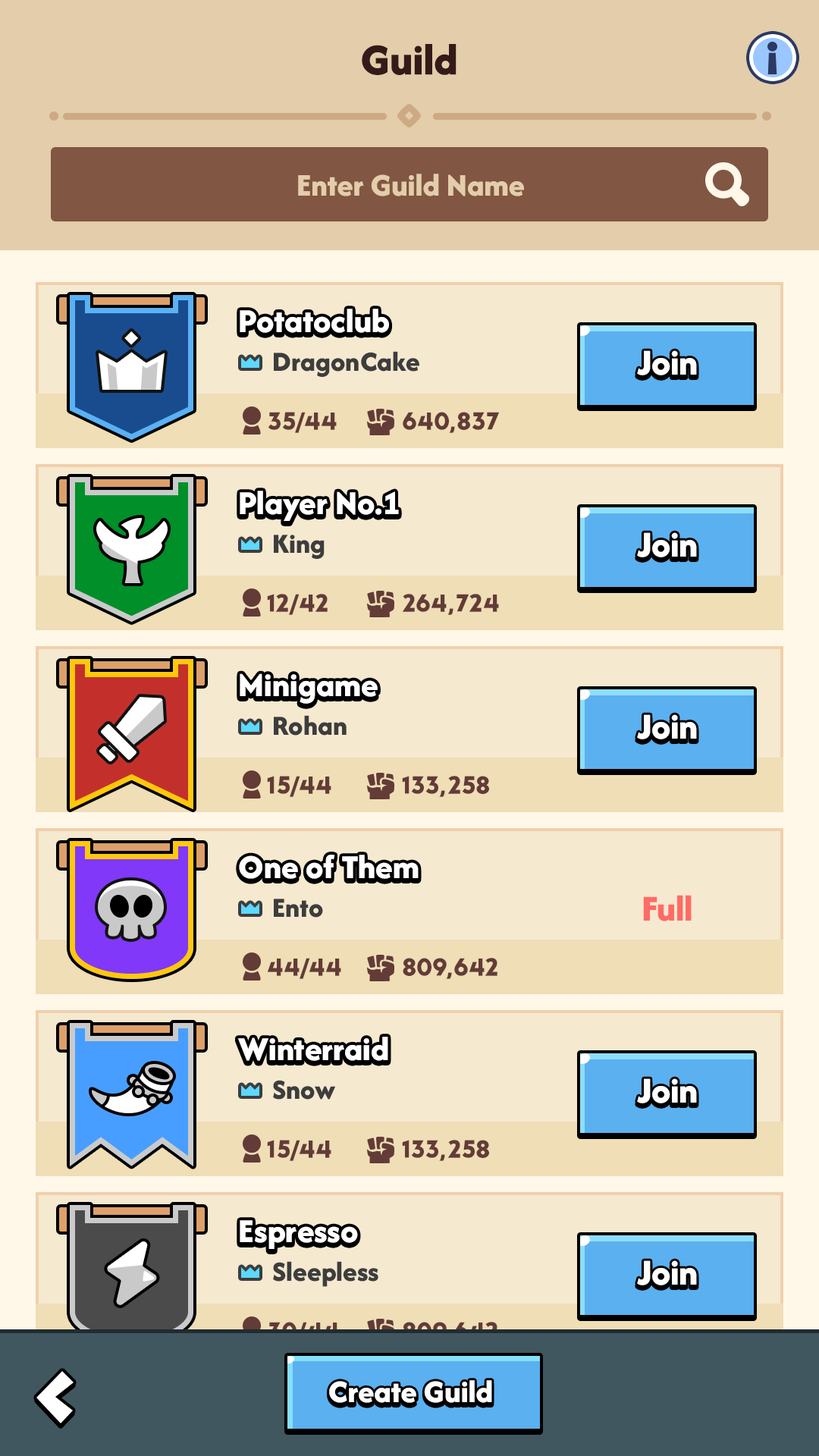
<style>
.page{position:relative;width:819px;height:1456px}
.page>*{position:absolute;margin:0}
.t1{font:45.5px "AfacadFlux-ExtraBold";color:#341b19}
.t2{font:32.8px "AfacadFlux-ExtraBold";color:#e3cdaa}
.t3{font:34.9px "AfacadFlux-ExtraBold";color:#ffffff}
.t4{font:28.8px "AfacadFlux-ExtraBold";color:#3d3d3d}
.t5{font:37.9px "AfacadFlux-ExtraBold";color:#ffffff}
.t6{font:25.8px "LTAvocado-Bold";color:#633b37}
.t7{font:37.9px "AfacadFlux-ExtraBold";color:#ff6b67}
.t8{font:25.8px "LTAvocado-Bold"}
.t9{font:32.8px "AfacadFlux-ExtraBold";color:#ffffff}
</style>
<div class="page">
<p class="t1" style="left:362px;top:44px;width:95px;height:31px">Guild</p>
<p class="t2" style="left:298px;top:174px;width:226px;height:22px">Enter Guild Name</p>
<p class="t3" style="left:240px;top:309px;width:149px;height:24px">Potatoclub</p>
<p class="t4" style="left:274px;top:351px;width:145px;height:26px">DragonCake</p>
<p class="t5" style="left:637px;top:350px;width:60px;height:25px">Join</p>
<p class="t6" style="left:268px;top:412px;width:69px;height:21px">35/44</p>
<p class="t6" style="left:403px;top:412px;width:97px;height:21px">640,837</p>
<p class="t3" style="left:240px;top:491px;width:159px;height:30px">Player No.1</p>
<p class="t5" style="left:637px;top:532px;width:60px;height:25px">Join</p>
<p class="t4" style="left:274px;top:535px;width:51px;height:24px">King</p>
<p class="t6" style="left:267px;top:594px;width:61px;height:21px">12/42</p>
<p class="t6" style="left:402px;top:594px;width:97px;height:21px">264,724</p>
<p class="t3" style="left:240px;top:673px;width:138px;height:31px">Minigame</p>
<p class="t4" style="left:274px;top:715px;width:73px;height:21px">Rohan</p>
<p class="t5" style="left:637px;top:714px;width:60px;height:25px">Join</p>
<p class="t6" style="left:267px;top:776px;width:64px;height:21px">15/44</p>
<p class="t6" style="left:402px;top:776px;width:87px;height:21px">133,258</p>
<p class="t3" style="left:239px;top:855px;width:180px;height:24px">One of Them</p>
<p class="t4" style="left:274px;top:899px;width:49px;height:19px">Ento</p>
<p class="t7" style="left:643px;top:895px;width:49px;height:26px">Full</p>
<p class="t6" style="left:267px;top:958px;width:74px;height:21px">44/44</p>
<p class="t6" style="left:403px;top:958px;width:94px;height:21px">809,642</p>
<p class="t3" style="left:237px;top:1037px;width:151px;height:24px">Winterraid</p>
<p class="t4" style="left:273px;top:1080px;width:63px;height:20px">Snow</p>
<p class="t5" style="left:637px;top:1078px;width:60px;height:25px">Join</p>
<p class="t6" style="left:267px;top:1140px;width:64px;height:21px">15/44</p>
<p class="t6" style="left:402px;top:1140px;width:87px;height:21px">133,258</p>
<p class="t3" style="left:240px;top:1220px;width:118px;height:29px">Espresso</p>
<p class="t4" style="left:273px;top:1261px;width:105px;height:26px">Sleepless</p>
<p class="t5" style="left:637px;top:1260px;width:60px;height:25px">Join</p>
<p class="t8" style="left:268px;top:1322px;width:71px;height:21px">30/44</p>
<p class="t8" style="left:403px;top:1322px;width:94px;height:21px">809,642</p>
<p class="t9" style="left:329px;top:1380px;width:163px;height:23px">Create Guild</p>
</div>
